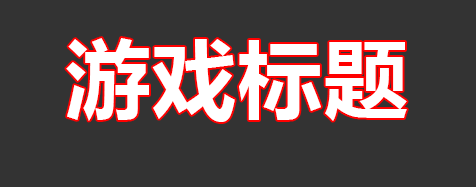
<style>
.page{position:relative;width:476px;height:187px;background:#333333}
.page>*{position:absolute;margin:0}
.t1{font:84px "MicrosoftYaHei-Bold";letter-spacing:0.025em;color:#ffffff}
</style>
<div class="page">
<p class="t1" style="left:66px;top:38px;width:341px;height:84px">游戏标题</p>
</div>
